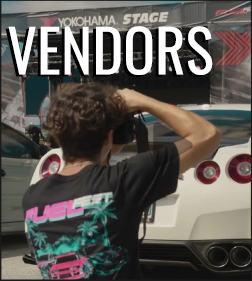
<style>
.page{position:relative;width:252px;height:281px}
.page>*{position:absolute;margin:0}
.t1{font:59px "Oswald-Regular";color:#fefffe;font-weight:bold}
</style>
<div class="page">
<p class="t1" style="left:8px;top:26px;width:205px;height:49px">VENDORS</p>
</div>
